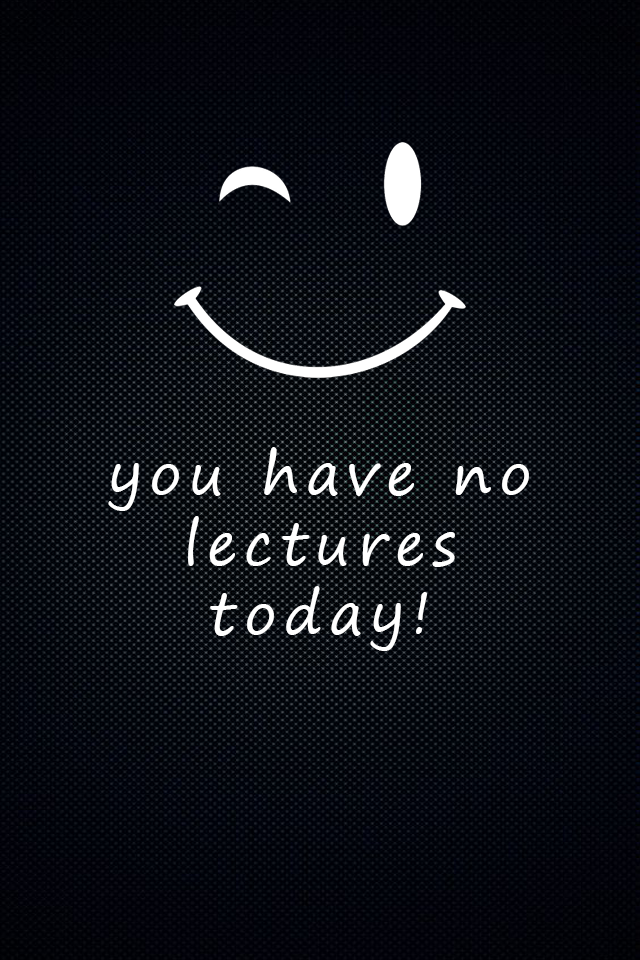
<style>
.page{position:relative;width:640px;height:960px}
.page>*{position:absolute;margin:0}
.t1{font:58.3px "SegoePrint";letter-spacing:0.12em;color:#ffffff}
</style>
<div class="page">
<p class="t1" style="left:108px;top:447px;width:421px;height:204px;text-align:center">you have no lectures today!</p>
</div>
